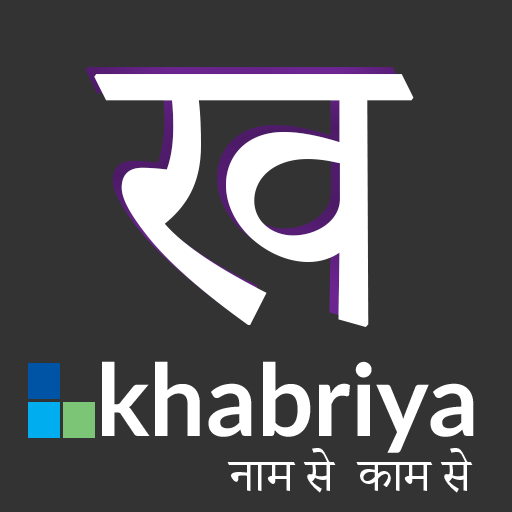
<style>
.page{position:relative;width:512px;height:512px;background:#333333}
.page>*{position:absolute;margin:0}
.t1{font:500px "AdobeDevanagari-Regular";color:#ffffff}
.t2{font:100px "Lato-Bold";color:#ffffff}
.t3{font:58.3px "AdobeDevanagari-Regular";color:#ffffff}
</style>
<div class="page">
<p class="t1" style="left:85px;top:67px;width:320px;height:253px">ख</p>
<p class="t1" style="left:94px;top:74px;width:320px;height:253px">ख</p>
<p class="t2" style="left:102px;top:361px;width:372px;height:92px">khabriya</p>
<p class="t3" style="left:227px;top:448px;width:246px;height:45px">नाम से  काम से</p>
</div>
